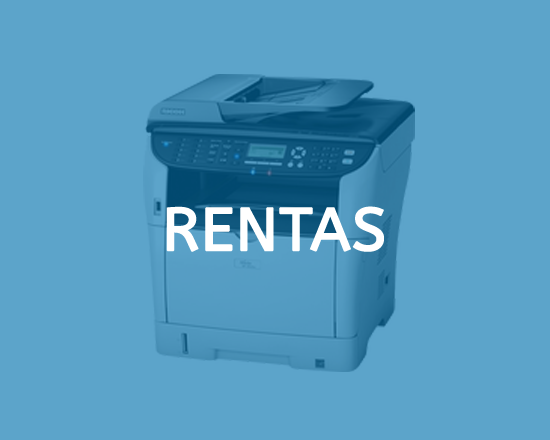
<style>
.page{position:relative;width:550px;height:440px;background:#5ca4ca}
.page>*{position:absolute;margin:0}
.t1{font:60px "ABeeZee-Regular";color:#ffffff;font-weight:bold}
</style>
<div class="page">
<p class="t1" style="left:166px;top:206px;width:218px;height:46px">RENTAS</p>
</div>
